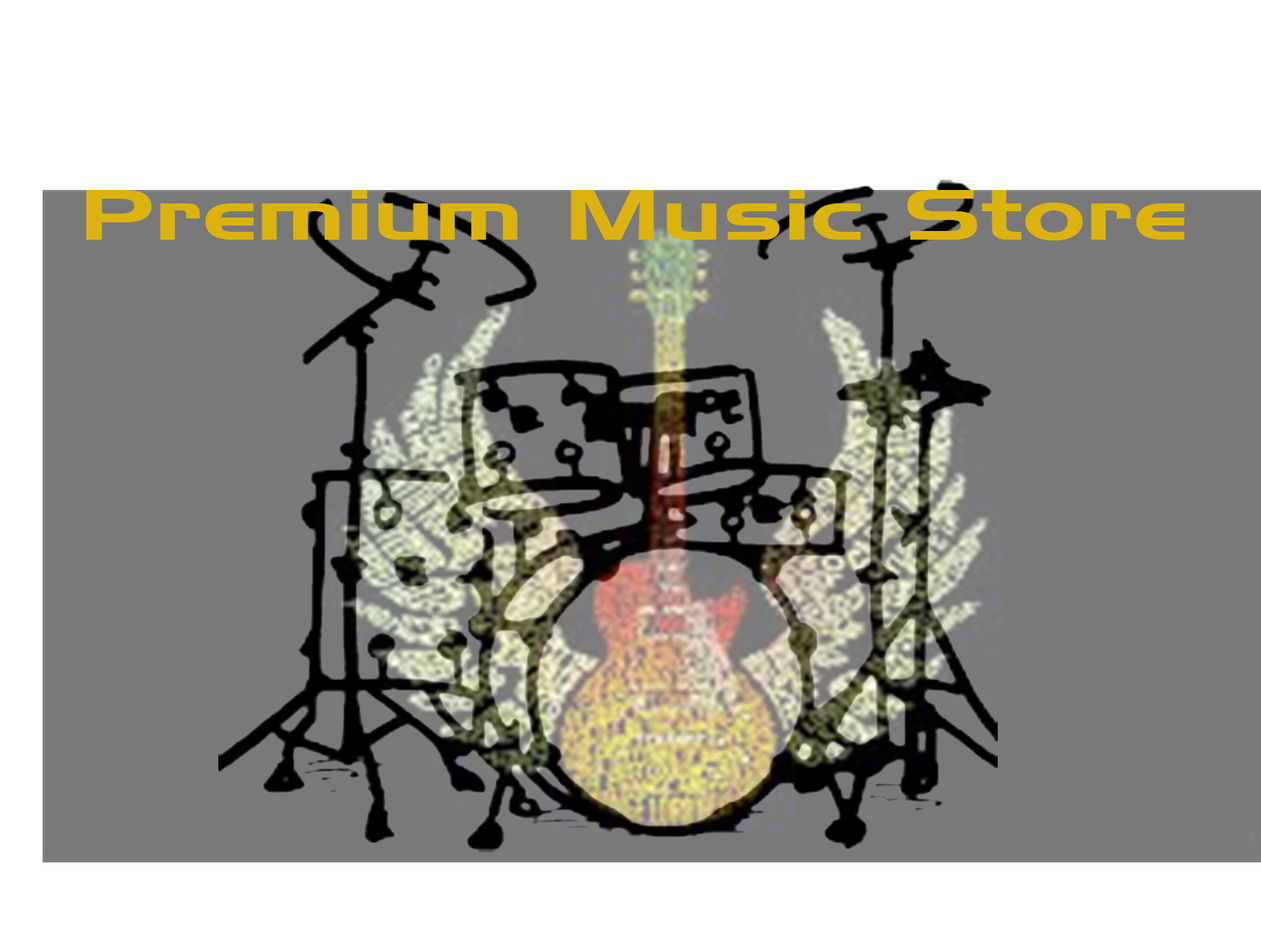
<style>
.page{position:relative;width:1261px;height:946px;background:#797979}
.page>*{position:absolute;margin:0}
.t1{font:70.1px "HanzelExtendedNormal";color:#dcb30e}
</style>
<div class="page">
<p class="t1" style="left:86px;top:190px;width:1098px;height:50px">Premium Music Store</p>
</div>
